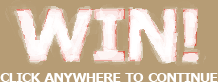
<style>
.page{position:relative;width:218px;height:82px;background:#b69c75}
.page>*{position:absolute;margin:0}
.t1{font:72px "Verdana-Bold";letter-spacing:-0.06em;color:#ffffff;font-variant:small-caps}
.t2{font:18px "Verdana-Bold";letter-spacing:-0.06em;color:#ffffff;font-variant:small-caps}
</style>
<div class="page">
<p class="t1" style="left:16px;top:9px;width:182px;height:52px;opacity:0.5">WIN!</p>
<p class="t2" style="left:0px;top:73px;width:218px;height:9px">click anywhere to continue</p>
</div>
